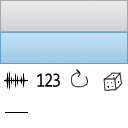
<style>
.page{position:relative;width:128px;height:128px;background:#ffffff}
.page>*{position:absolute;margin:0}
.t1{font:20.4px "Consolas";letter-spacing:-0.08em;color:#000000;scale:0.83 1}
</style>
<div class="page">
<p class="t1" style="left:37px;top:73px;width:23px;height:14px">123</p>
</div>
